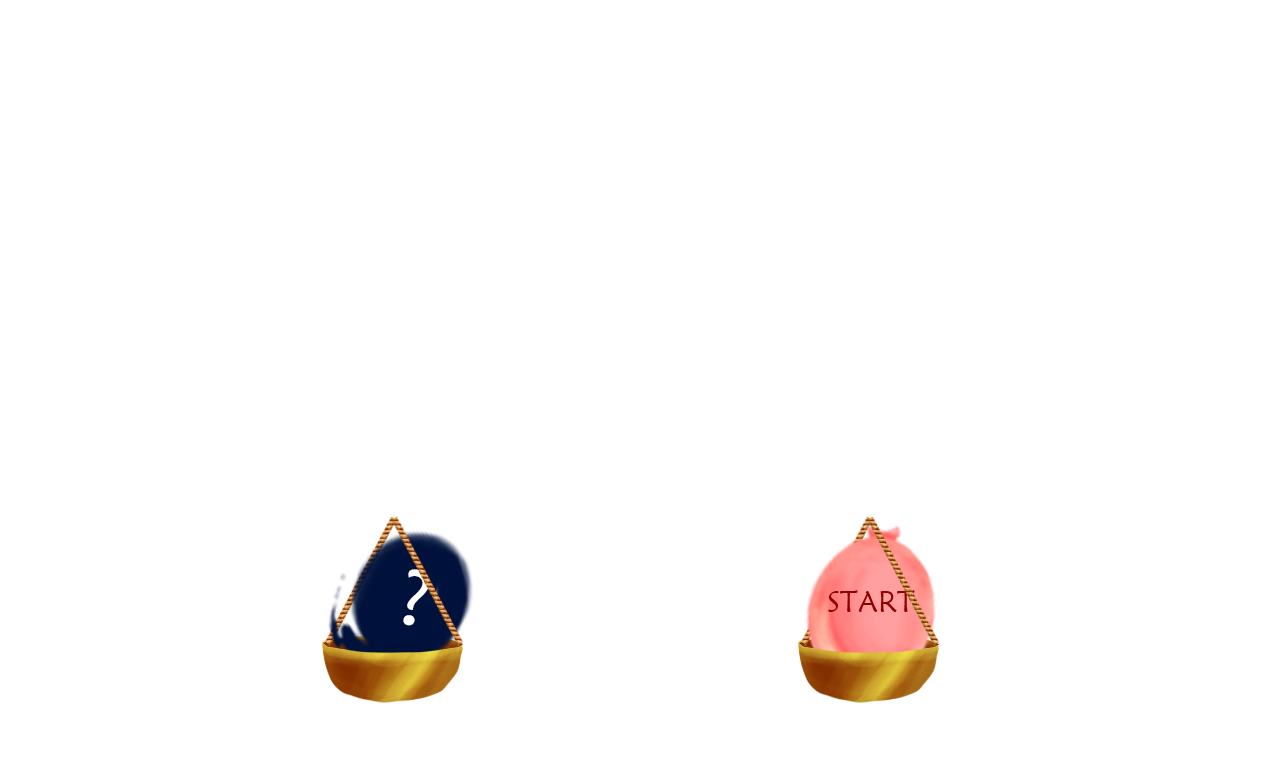
<style>
.page{position:relative;width:1280px;height:760px;background:#ffffff}
.page>*{position:absolute;margin:0}
.t1{font:80px "MaiandraGD-Regular";color:#ffffff}
.t2{font:30px "MaiandraGD-Regular";color:#940000}
</style>
<div class="page">
<p class="t1" style="left:403px;top:569px;width:26px;height:57px;rotate:10deg">?</p>
<p class="t2" style="left:828px;top:590px;width:87px;height:22px">START</p>
</div>
